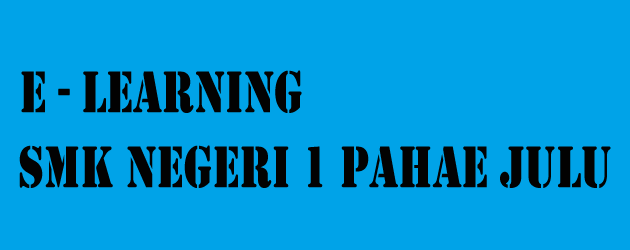
<style>
.page{position:relative;width:630px;height:250px;background:#00a3e8}
.page>*{position:absolute;margin:0}
.t1{font:61.2px "Stencil";color:#020202;scale:0.75 1}
</style>
<div class="page">
<p class="t1" style="left:21px;top:70px;width:281px;height:43px">e - learning</p>
<p class="t1" style="left:19px;top:145px;width:592px;height:43px">SMK NEGERI 1 PAHAE Julu</p>
</div>
